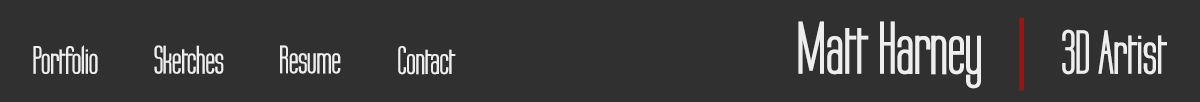
<style>
.page{position:relative;width:1200px;height:102px;background:#303030}
.page>*{position:absolute;margin:0}
.t1{font:15.1px "Labtop-Bold";color:#eeeeee}
.t2{font:15.1px "Labtop-Bold";color:#9f1313}
.t3{font:52.1px "Labtop-Bold";color:#eeeeee}
.t4{font:33.3px "Labtop-Bold";color:#eeeeee}
</style>
<div class="page">
<p class="t1" style="left:798px;top:18px;width:369px;height:73px">Matt Harney  <span class="t2">|  </span><span class="t3">3D Artist</span></p>
<p class="t4" style="left:33px;top:45px;width:65px;height:29px">Portfolio</p>
<p class="t4" style="left:154px;top:45px;width:70px;height:29px">Sketches</p>
<p class="t4" style="left:280px;top:45px;width:61px;height:29px">Resume</p>
<p class="t4" style="left:398px;top:46px;width:58px;height:29px">Contact</p>
</div>
